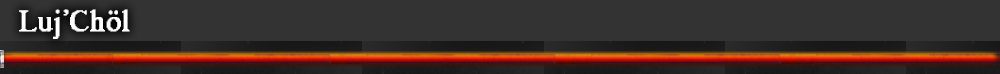
<style>
.page{position:relative;width:1000px;height:74px;background:#333333}
.page>*{position:absolute;margin:0}
.t1{font:30px "MS Serif";letter-spacing:0.01em;color:#ffffff;font-weight:bold}
</style>
<div class="page">
<p class="t1" style="left:19px;top:9px;width:111px;height:30px">Luj’Chöl</p>
</div>
